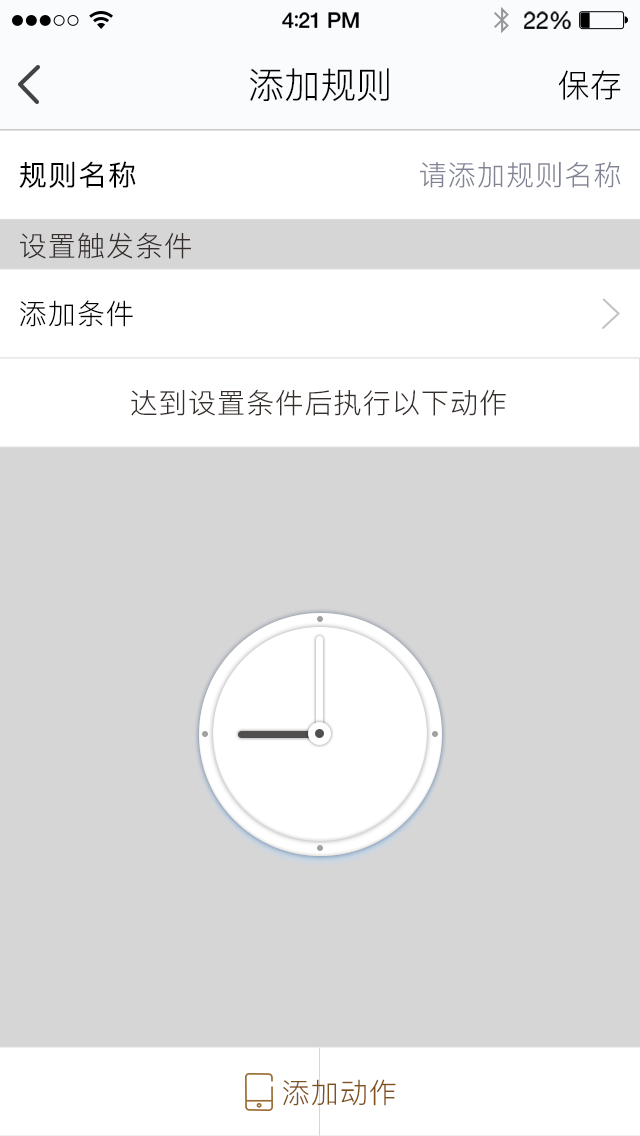
<style>
.page{position:relative;width:640px;height:1136px;background:#d6d6d7}
.page>*{position:absolute;margin:0}
.t1{font:36px "PingFang-SC-Regular";color:#000000}
.t2{font:32px "PingFang-SC-Regular"}
.t3{font:32px "PingFang-SC-Regular";color:#000000}
.t4{font:28px "PingFang-SC-Regular";letter-spacing:0.04em;color:#000000;font-weight:bold}
.t5{font:28px "PingFang-SC-Regular";letter-spacing:0.04em;color:#7f8393}
.t6{font:28px "PingFang-SC-Regular";letter-spacing:0.04em;color:#362e2b}
.t7{font:28px "PingFang-SC-Regular";letter-spacing:0.04em;color:#000000}
.t8{font:28px "PingFang-SC-Regular";letter-spacing:0.04em;color:#81511c}
</style>
<div class="page">
<p class="t1" style="left:250px;top:68px;width:139px;height:34px">添加规则</p>
<p class="t1" style="left:250px;top:68px;width:139px;height:34px">添加规则</p>
<p class="t2" style="left:558px;top:70px;width:62px;height:30px">保持</p>
<p class="t3" style="left:558px;top:70px;width:63px;height:30px">保存</p>
<p class="t4" style="left:19px;top:161px;width:117px;height:27px">规则名称</p>
<p class="t5" style="left:420px;top:161px;width:201px;height:27px">请添加规则名称</p>
<p class="t6" style="left:20px;top:232px;width:171px;height:27px">设置触发条件</p>
<p class="t7" style="left:20px;top:300px;width:113px;height:27px">添加条件</p>
<p class="t6" style="left:131px;top:389px;width:375px;height:27px">达到设置条件后执行以下动作</p>
<p class="t8" style="left:283px;top:1079px;width:113px;height:27px">添加动作</p>
</div>
